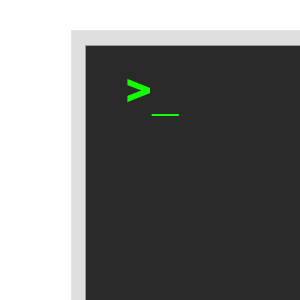
<style>
.page{position:relative;width:300px;height:300px;background:#2a2a2a}
.page>*{position:absolute;margin:0}
.t1{font:48px "Impact";color:#11ff00}
</style>
<div class="page">
<p class="t1" style="left:127px;top:79px;width:52px;height:37px">&gt;_</p>
</div>
